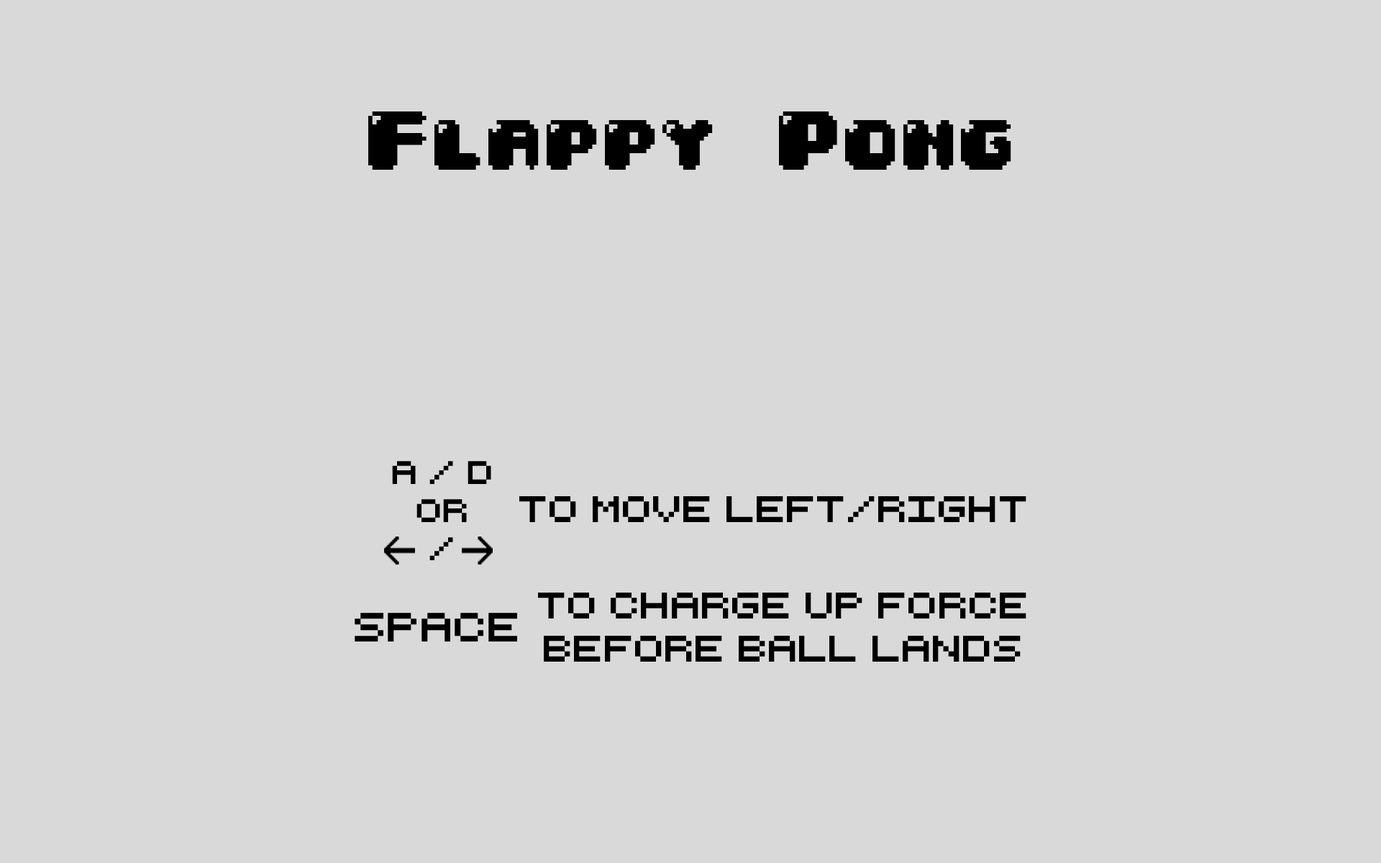
<style>
.page{position:relative;width:1381px;height:863px;background:#d9d9d9}
.page>*{position:absolute;margin:0}
.t1{font:70.5px "04b30";color:#000000}
.t2{font:31.7px "RetroComputer";color:#000000}
.t3{font:36px "RetroComputer";color:#000000}
.t4{font:39.6px "RetroComputer";color:#000000}
</style>
<div class="page">
<p class="t1" style="left:368px;top:112px;width:643px;height:58px">Flappy Pong</p>
<p class="t2" style="left:392px;top:461px;width:99px;height:99px;text-align:center">A / D<br>or<br>/</p>
<p class="t3" style="left:519px;top:496px;width:508px;height:26px">to move left/right</p>
<p class="t3" style="left:538px;top:593px;width:489px;height:69px;text-align:center">to charge up force<br>before ball lands</p>
<p class="t4" style="left:355px;top:613px;width:162px;height:29px">Space</p>
</div>
